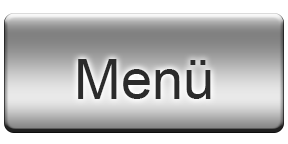
<style>
.page{position:relative;width:288px;height:144px;background:#ffffff}
.page>*{position:absolute;margin:0}
.t1{font:56px "ArialMT";color:#2b2b2b}
</style>
<div class="page">
<p class="t1" style="left:78px;top:59px;width:133px;height:40px">Menü</p>
</div>
